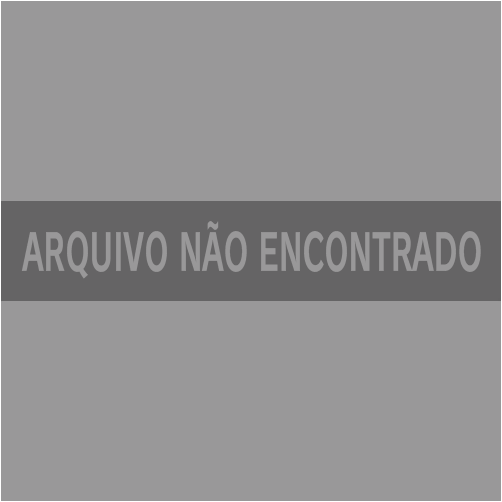
<style>
.page{position:relative;width:502px;height:502px;background:#999899}
.page>*{position:absolute;margin:0}
.t1{font:49.8px "RodinHappyPro-B";color:#999899;scale:0.6 1}
</style>
<div class="page">
<p class="t1" style="left:21px;top:221px;width:460px;height:58px">ARQUIVO NÃO ENCONTRADO</p>
</div>
